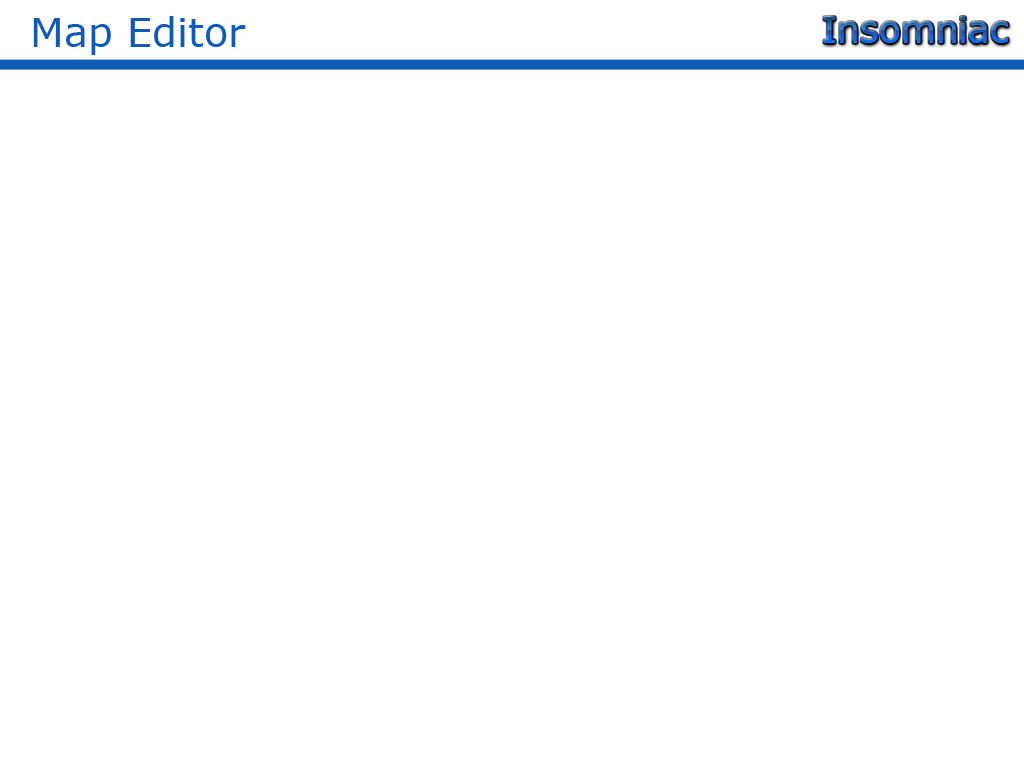
<style>
.page{position:relative;width:1024px;height:768px;background:#ffffff}
.page>*{position:absolute;margin:0}
.t1{font:40px "Verdana";color:#1059b7}
.t2{font:36px "Verdana"}
</style>
<div class="page">
<p class="t1" style="left:33px;top:16px;width:213px;height:39px">Map Editor</p>
<p class="t2" style="left:824px;top:17px;width:184px;height:26px">Insomniac</p>
</div>
